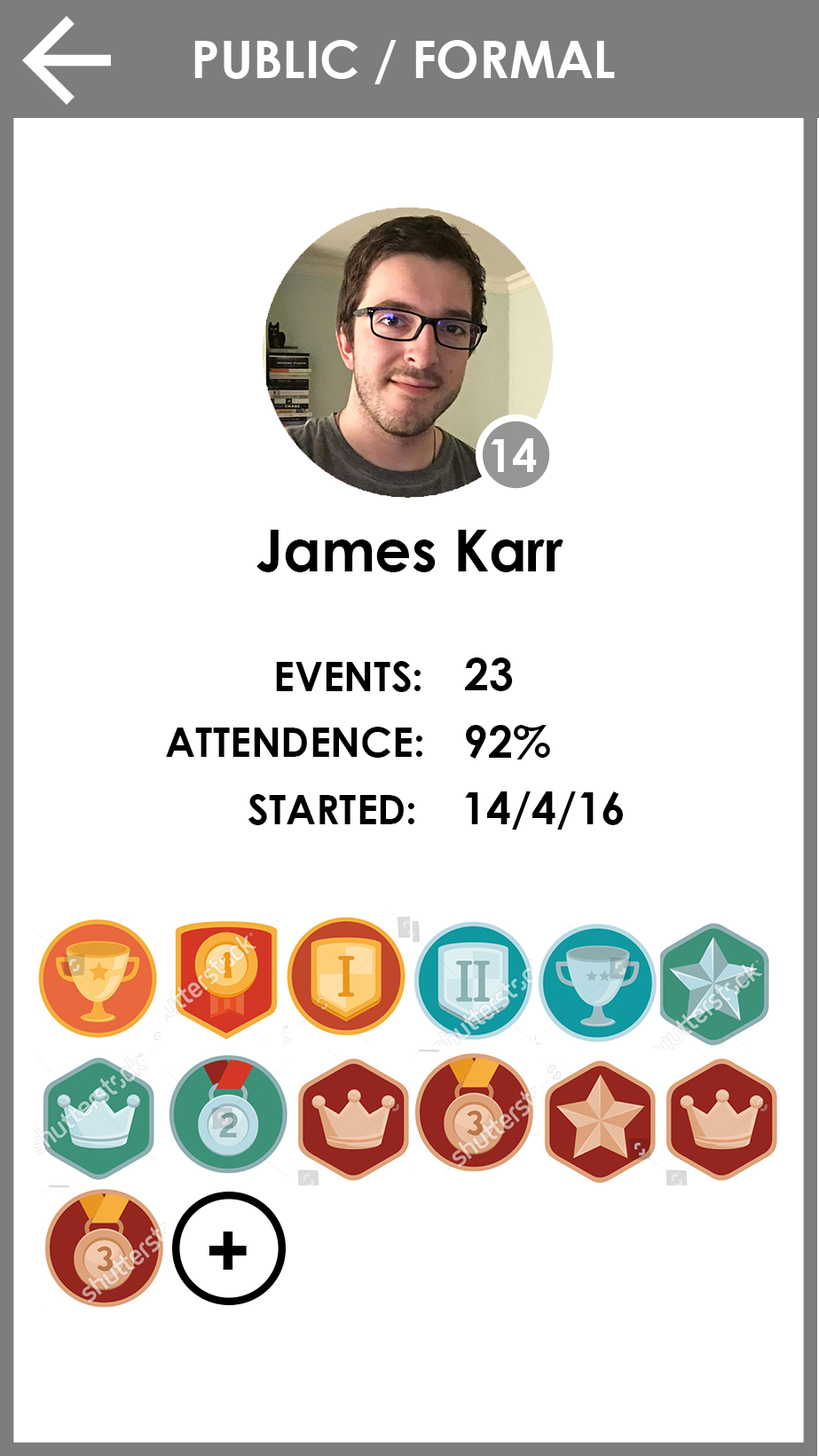
<style>
.page{position:relative;width:819px;height:1456px;background:#ffffff}
.page>*{position:absolute;margin:0}
.t1{font:51.3px "CenturyGothic-Bold";color:#ffffff}
.t2{font:45.1px "CenturyGothic-Bold";color:#ffffff}
.t3{font:57.5px "CenturyGothic-Bold";color:#000000}
.t4{font:40.6px "CenturyGothic-Bold";color:#000000}
.t5{font:44.2px "CenturyGothic-Bold";color:#000000}
.t6{font:76.1px "CenturyGothic-Bold";color:#000000}
</style>
<div class="page">
<p class="t1" style="left:194px;top:40px;width:421px;height:44px">PUBLIC / FORMAL</p>
<p class="t2" style="left:491px;top:438px;width:46px;height:34px">14</p>
<p class="t3" style="left:256px;top:530px;width:307px;height:42px">James Karr</p>
<p class="t4" style="left:276px;top:661px;width:145px;height:31px">EVENTS:</p>
<p class="t5" style="left:465px;top:657px;width:48px;height:34px">23</p>
<p class="t5" style="left:466px;top:725px;width:84px;height:35px">92%</p>
<p class="t4" style="left:166px;top:727px;width:256px;height:31px">ATTENDENCE:</p>
<p class="t4" style="left:248px;top:794px;width:166px;height:31px">STARTED:</p>
<p class="t5" style="left:465px;top:791px;width:158px;height:39px">14/4/16</p>
<p class="t6" style="left:209px;top:1232px;width:38px;height:38px">+</p>
</div>
